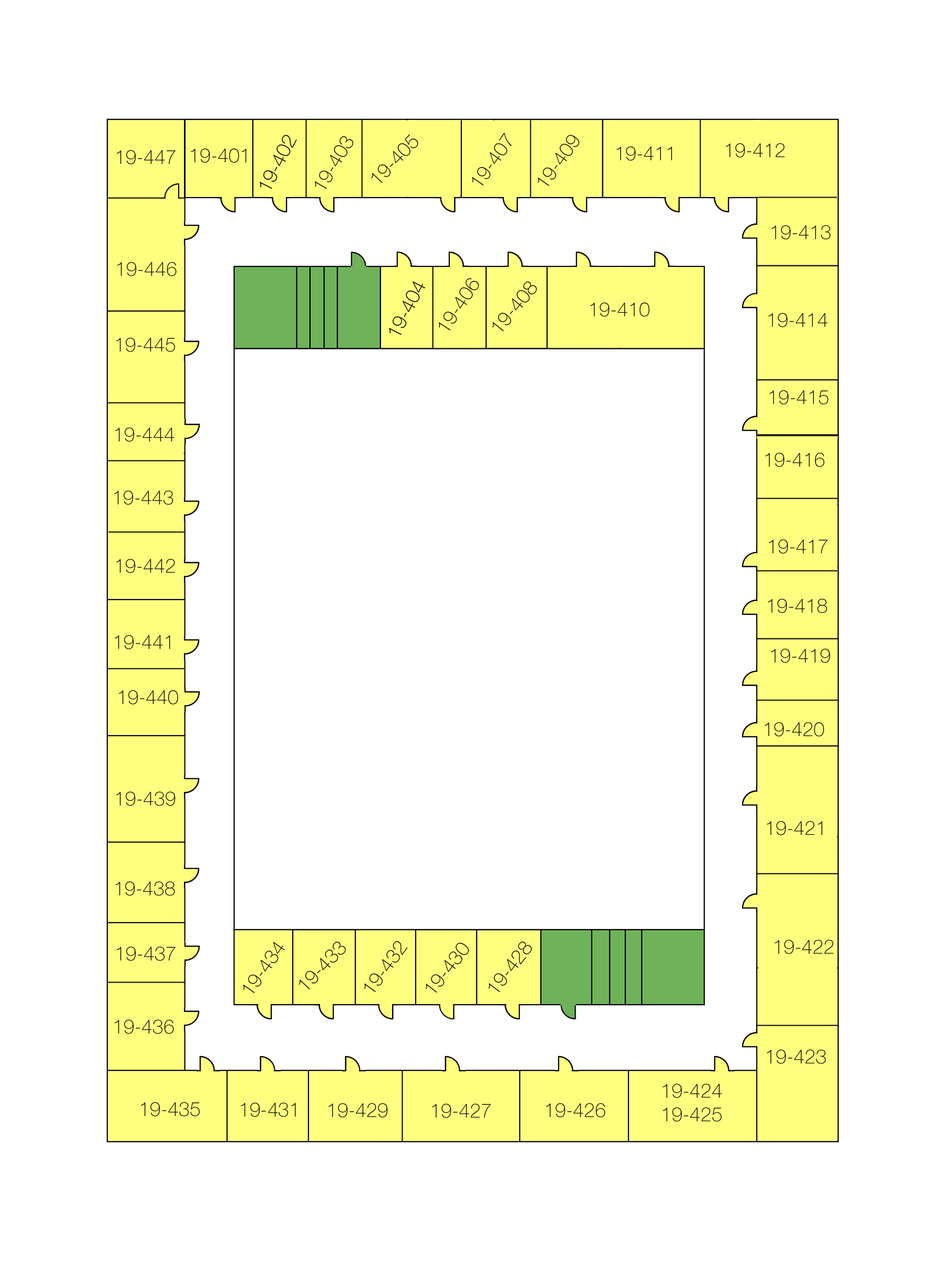
<style>
.page{position:relative;width:946px;height:1261px;background:#ffffff}
.page>*{position:absolute;margin:0}
.t1{font:19.7px "HelveticaNeueCyr-Thin";color:#090909}
</style>
<div class="page">
<p class="t1" style="left:260px;top:134px;width:37px;height:55px;rotate:-63deg">19-402</p>
<p class="t1" style="left:315px;top:136px;width:38px;height:53px;rotate:-59deg">19-403</p>
<p class="t1" style="left:371px;top:134px;width:47px;height:49px;rotate:-47deg">19-405</p>
<p class="t1" style="left:472px;top:132px;width:40px;height:53px;rotate:-55deg">19-407</p>
<p class="t1" style="left:537px;top:134px;width:42px;height:52px;rotate:-55deg">19-409</p>
<p class="t1" style="left:117px;top:150px;width:58px;height:14px">19-447</p>
<p class="t1" style="left:191px;top:148px;width:55px;height:15px">19-401</p>
<p class="t1" style="left:616px;top:146px;width:56px;height:15px">19-411</p>
<p class="t1" style="left:726px;top:143px;width:58px;height:15px">19-412</p>
<p class="t1" style="left:771px;top:225px;width:60px;height:15px">19-413</p>
<p class="t1" style="left:117px;top:262px;width:60px;height:14px">19-446</p>
<p class="t1" style="left:389px;top:281px;width:36px;height:54px;rotate:-63deg">19-404</p>
<p class="t1" style="left:438px;top:278px;width:41px;height:52px;rotate:-57deg">19-406</p>
<p class="t1" style="left:492px;top:281px;width:45px;height:51px;rotate:-51deg">19-408</p>
<p class="t1" style="left:590px;top:302px;width:59px;height:15px">19-410</p>
<p class="t1" style="left:768px;top:313px;width:59px;height:14px">19-414</p>
<p class="t1" style="left:116px;top:337px;width:59px;height:15px">19-445</p>
<p class="t1" style="left:769px;top:390px;width:59px;height:15px">19-415</p>
<p class="t1" style="left:115px;top:427px;width:59px;height:15px">19-444</p>
<p class="t1" style="left:765px;top:452px;width:59px;height:15px">19-416</p>
<p class="t1" style="left:114px;top:490px;width:59px;height:15px">19-443</p>
<p class="t1" style="left:769px;top:539px;width:58px;height:15px">19-417</p>
<p class="t1" style="left:116px;top:558px;width:59px;height:15px">19-442</p>
<p class="t1" style="left:768px;top:598px;width:59px;height:15px">19-418</p>
<p class="t1" style="left:115px;top:635px;width:55px;height:14px">19-441</p>
<p class="t1" style="left:771px;top:648px;width:59px;height:15px">19-419</p>
<p class="t1" style="left:119px;top:690px;width:59px;height:15px">19-440</p>
<p class="t1" style="left:764px;top:722px;width:60px;height:15px">19-420</p>
<p class="t1" style="left:116px;top:791px;width:59px;height:15px">19-439</p>
<p class="t1" style="left:767px;top:821px;width:55px;height:14px">19-421</p>
<p class="t1" style="left:116px;top:881px;width:59px;height:15px">19-438</p>
<p class="t1" style="left:243px;top:941px;width:42px;height:52px;rotate:-55deg">19-434</p>
<p class="t1" style="left:298px;top:941px;width:48px;height:48px;rotate:-47deg">19-433</p>
<p class="t1" style="left:364px;top:941px;width:44px;height:51px;rotate:-54deg">19-432</p>
<p class="t1" style="left:488px;top:941px;width:44px;height:51px;rotate:-52deg">19-428</p>
<p class="t1" style="left:774px;top:939px;width:59px;height:15px">19-422</p>
<p class="t1" style="left:117px;top:946px;width:58px;height:15px">19-437</p>
<p class="t1" style="left:426px;top:943px;width:43px;height:50px;rotate:-52deg">19-430</p>
<p class="t1" style="left:115px;top:1019px;width:59px;height:15px">19-436</p>
<p class="t1" style="left:767px;top:1049px;width:59px;height:15px">19-423</p>
<p class="t1" style="left:663px;top:1083px;width:59px;height:39px;text-align:center">19-424<br>19-425</p>
<p class="t1" style="left:141px;top:1102px;width:59px;height:14px">19-435</p>
<p class="t1" style="left:241px;top:1102px;width:55px;height:15px">19-431</p>
<p class="t1" style="left:328px;top:1103px;width:60px;height:14px">19-429</p>
<p class="t1" style="left:432px;top:1103px;width:59px;height:15px">19-427</p>
<p class="t1" style="left:546px;top:1103px;width:59px;height:14px">19-426</p>
</div>
